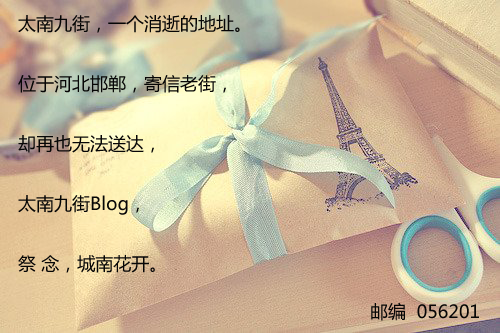
<style>
.page{position:relative;width:500px;height:333px}
.page>*{position:absolute;margin:0}
.t1{font:18px/60px "MicrosoftYaHei";color:#060606}
.t2{font:18px "MicrosoftYaHei";color:#060606}
</style>
<div class="page">
<p class="t1" style="left:18px;top:15px;width:222px;height:258px">太南九街，一个消逝的地址。<br>位于河北邯郸，寄信老街，<br>却再也无法送达，<br>太南九街Blog，<br>祭 念，城南花开。</p>
<p class="t2" style="left:371px;top:302px;width:108px;height:19px">邮编  056201</p>
</div>
